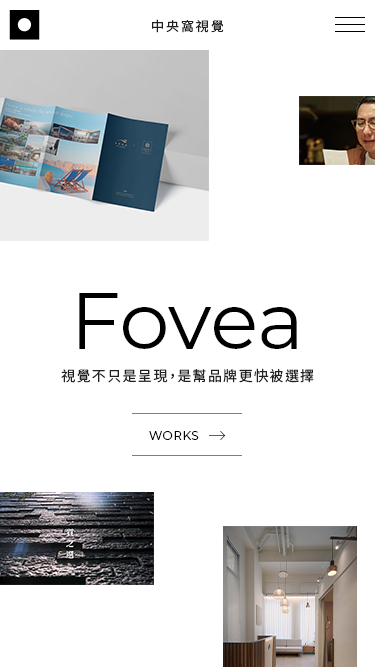
<style>
.page{position:relative;width:375px;height:667px;background:#ffffff}
.page>*{position:absolute;margin:0}
.t1{font:13px "NotoSansTC-Regular";letter-spacing:0.15em;color:#202020}
.t2{font:80px "Montserrat-Regular";color:#000000}
.t3{font:14px "NotoSansTC-Regular";letter-spacing:0.1em;color:#202020}
.t4{font:12px "Montserrat-Regular";letter-spacing:0.05em;color:#000000;text-transform:uppercase}
</style>
<div class="page">
<p class="t1" style="left:152px;top:19px;width:72px;height:14px">中央窩視覺</p>
<p class="t2" style="left:79px;top:293px;width:218px;height:56px">Fovea</p>
<p class="t3" style="left:61px;top:368px;width:253px;height:15px">視覺不只是呈現，是幫品牌更快被選擇</p>
<p class="t4" style="left:149px;top:431px;width:50px;height:9px">works</p>
</div>
